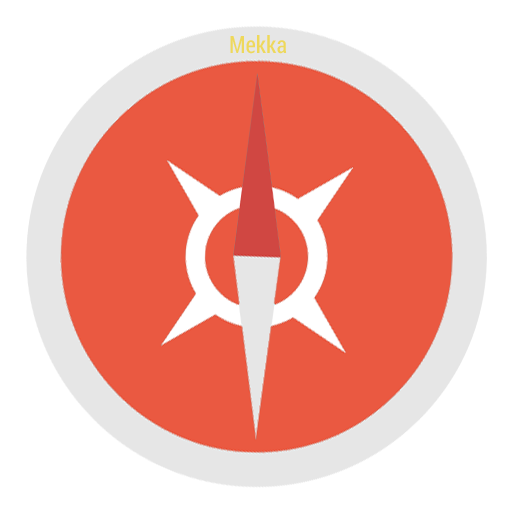
<style>
.page{position:relative;width:513px;height:512px;background:#ffffff}
.page>*{position:absolute;margin:0}
.t1{font:23.8px "RobotoCondensed-Regular";color:#eed85b}
</style>
<div class="page">
<p class="t1" style="left:230px;top:35px;width:57px;height:19px">Mekka</p>
</div>
